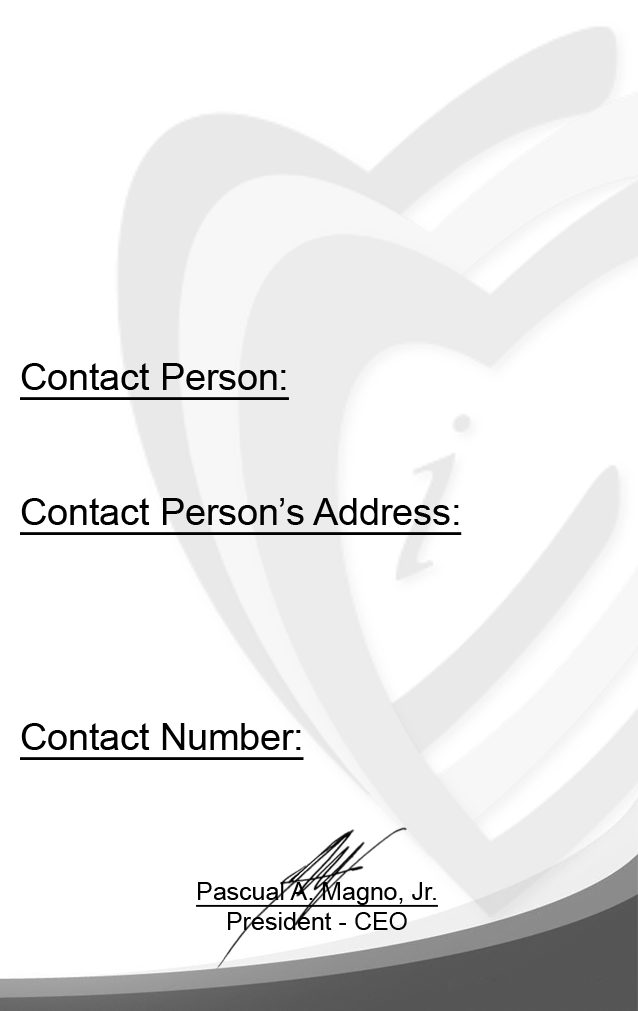
<style>
.page{position:relative;width:638px;height:1011px;background:#ffffff}
.page>*{position:absolute;margin:0}
.t1{font:37.5px "ArialMT";color:#000000;text-decoration:underline}
.t2{font:25px "ArialMT";color:#000000;text-decoration:underline}
.t3{font:25px "ArialMT";color:#000000}
</style>
<div class="page">
<p class="t1" style="left:20px;top:363px;width:442px;height:567px">Contact Person:<br><br><br>Contact Person’s Address:<br><br><br><br><br>Contact Number:<br><br><br><br><br><br><br><br><br><br><br><br><br><br><br><br><br><span class="t2">Pascual A. Magno, Jr.<br></span><span class="t3">President - CEO</span></p>
</div>
